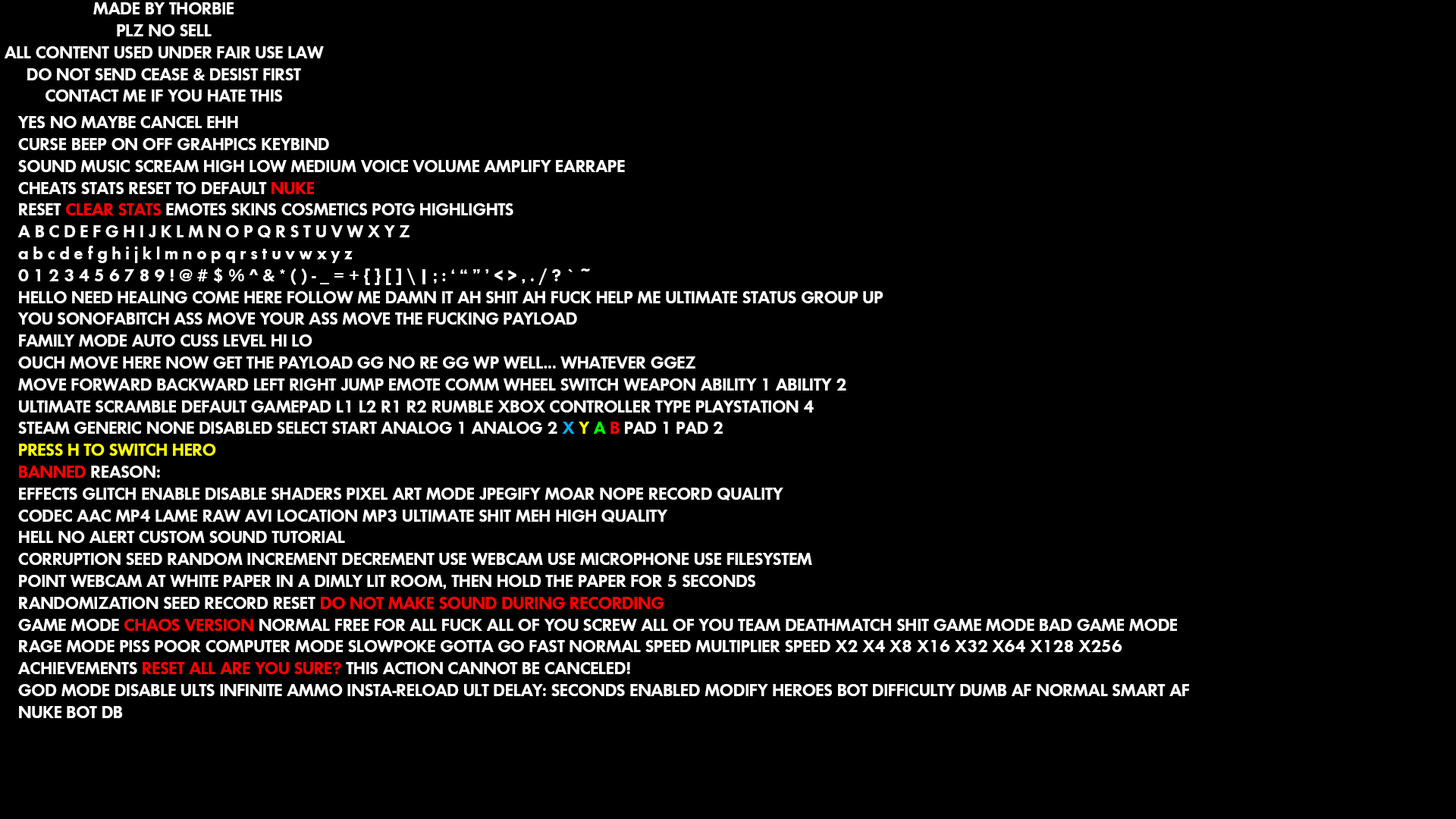
<style>
.page{position:relative;width:1456px;height:819px;background:#000000}
.page>*{position:absolute;margin:0}
.t1{font:18.2px "FuturaNo2D-DemiBold";color:#ffffff}
.t2{font:18.2px "FuturaNo2D-DemiBold";color:#ff0000}
.t3{font:18.2px "FuturaNo2D-DemiBold";color:#00aeef}
.t4{font:18.2px "FuturaNo2D-DemiBold";color:#ffff00}
.t5{font:18.2px "FuturaNo2D-DemiBold";color:#00ff00}
</style>
<div class="page">
<p class="t1" style="left:5px;top:2px;width:319px;height:100px;text-align:center">MADE BY THORBIE<br>PLZ NO SELL<br>ALL CONTENT USED UNDER FAIR USE LAW<br>DO NOT SEND CEASE &amp; DESIST FIRST<br>CONTACT ME IF YOU HATE THIS</p>
<p class="t1" style="left:17px;top:116px;width:1172px;height:602px">YES NO MAYBE CANCEL EHH<br>CURSE BEEP ON OFF GRAHPICS KEYBIND<br>SOUND MUSIC SCREAM HIGH LOW MEDIUM VOICE VOLUME AMPLIFY EARRAPE<br>CHEATS STATS RESET TO DEFAULT <span class="t2">NUKE<br></span>RESET <span class="t2">CLEAR STATS</span> EMOTES SKINS COSMETICS POTG HIGHLIGHTS<br>A B C D E F G H I J K L M N O P Q R S T U V W X Y Z<br>a b c d e f g h i j k l m n o p q r s t u v w x y z<br>0 1 2 3 4 5 6 7 8 9 ! @ # $ % ^ &amp; * ( ) - _ = + { } [ ] \ | ; : ‘ “ ” ’ &lt; &gt; , . / ? ` ~<br>HELLO NEED HEALING COME HERE FOLLOW ME DAMN IT AH SHIT AH FUCK HELP ME ULTIMATE STATUS GROUP UP<br>YOU SONOFABITCH ASS MOVE YOUR ASS MOVE THE FUCKING PAYLOAD<br>FAMILY MODE AUTO CUSS LEVEL HI LO <br>OUCH MOVE HERE NOW GET THE PAYLOAD GG NO RE GG WP WELL... WHATEVER GGEZ<br>MOVE FORWARD BACKWARD LEFT RIGHT JUMP EMOTE COMM WHEEL SWITCH WEAPON ABILITY 1 ABILITY 2<br>ULTIMATE SCRAMBLE DEFAULT GAMEPAD L1 L2 R1 R2 RUMBLE XBOX CONTROLLER TYPE PLAYSTATION 4<br>STEAM GENERIC NONE DISABLED SELECT START ANALOG 1 ANALOG 2 <span class="t3">X </span><span class="t4">Y </span><span class="t5">A </span><span class="t2">B</span> PAD 1 PAD 2<br><span class="t4">PRESS H TO SWITCH HERO<br></span><span class="t2">BANNED</span> REASON:<br>EFFECTS GLITCH ENABLE DISABLE SHADERS PIXEL ART MODE JPEGIFY MOAR NOPE RECORD QUALITY<br>CODEC AAC MP4 LAME RAW AVI LOCATION MP3 ULTIMATE SHIT MEH HIGH QUALITY<br>HELL NO ALERT CUSTOM SOUND TUTORIAL<br>CORRUPTION SEED RANDOM INCREMENT DECREMENT USE WEBCAM USE MICROPHONE USE FILESYSTEM<br>POINT WEBCAM AT WHITE PAPER IN A DIMLY LIT ROOM, THEN HOLD THE PAPER FOR 5 SECONDS<br>RANDOMIZATION SEED RECORD RESET <span class="t2">DO NOT MAKE SOUND DURING RECORDING<br></span>GAME MODE <span class="t2">CHAOS VERSION</span> NORMAL FREE FOR ALL FUCK ALL OF YOU SCREW ALL OF YOU TEAM DEATHMATCH SHIT GAME MODE BAD GAME MODE<br>RAGE MODE PISS POOR COMPUTER MODE SLOWPOKE GOTTA GO FAST NORMAL SPEED MULTIPLIER SPEED X2 X4 X8 X16 X32 X64 X128 X256<br>ACHIEVEMENTS <span class="t2">RESET ALL ARE YOU SURE?</span> THIS ACTION CANNOT BE CANCELED!<br>GOD MODE DISABLE ULTS INFINITE AMMO INSTA-RELOAD ULT DELAY: SECONDS ENABLED MODIFY HEROES BOT DIFFICULTY DUMB AF NORMAL SMART AF<br>NUKE BOT DB</p>
</div>
